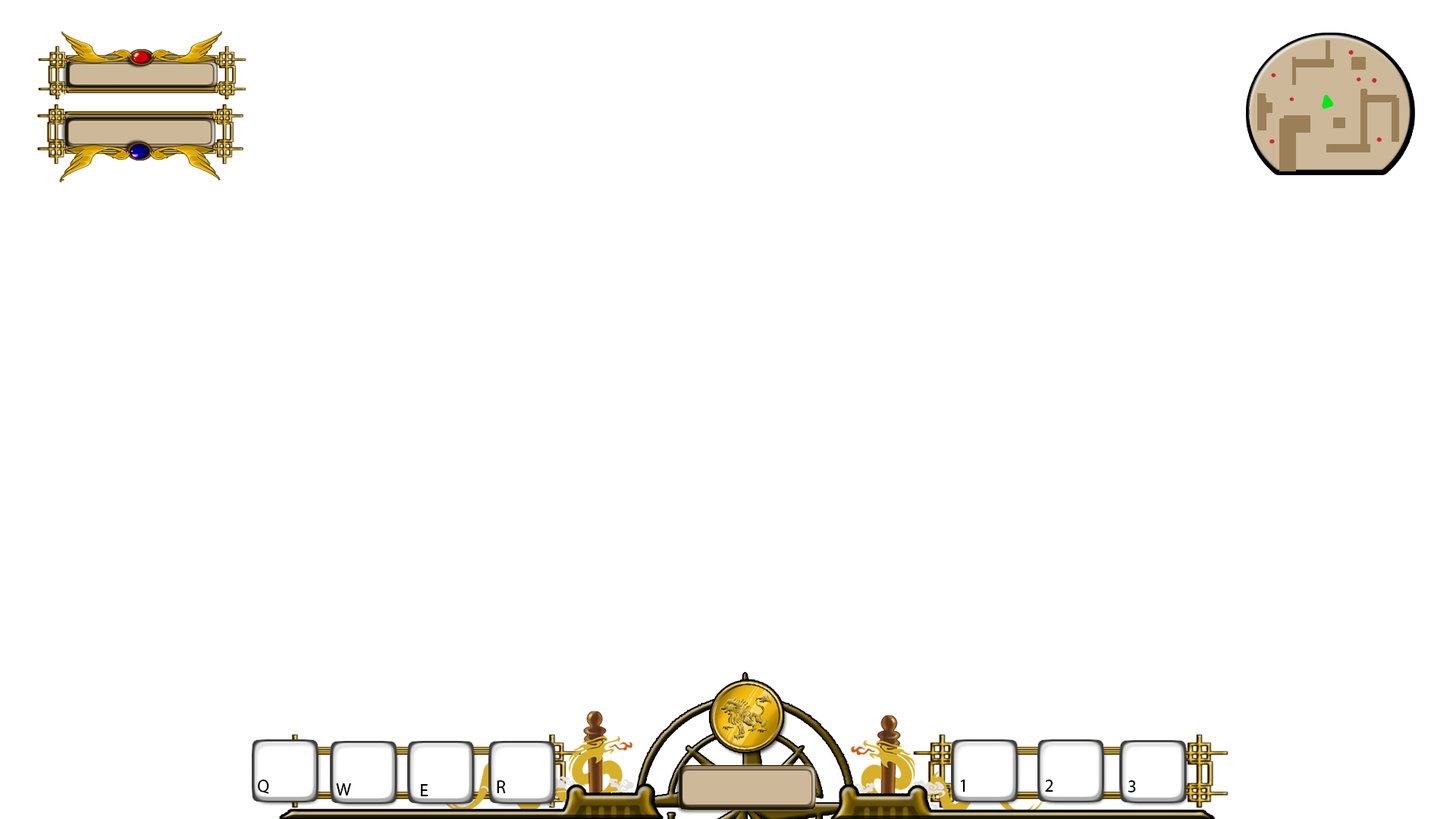
<style>
.page{position:relative;width:1456px;height:819px;background:#ffffff}
.page>*{position:absolute;margin:0}
.t1{font:17.8px "MyriadHebrew-Regular";color:#000000}
.t2{font:18.2px "MyriadHebrew-Regular";color:#000000}
</style>
<div class="page">
<p class="t1" style="left:258px;top:780px;width:11px;height:14px">Q</p>
<p class="t1" style="left:336px;top:783px;width:15px;height:12px">W</p>
<p class="t1" style="left:421px;top:784px;width:7px;height:12px">E</p>
<p class="t2" style="left:497px;top:780px;width:9px;height:13px">R</p>
<p class="t1" style="left:961px;top:780px;width:4px;height:12px">1</p>
<p class="t1" style="left:1045px;top:780px;width:8px;height:12px">2</p>
<p class="t1" style="left:1128px;top:780px;width:8px;height:12px">3</p>
</div>
